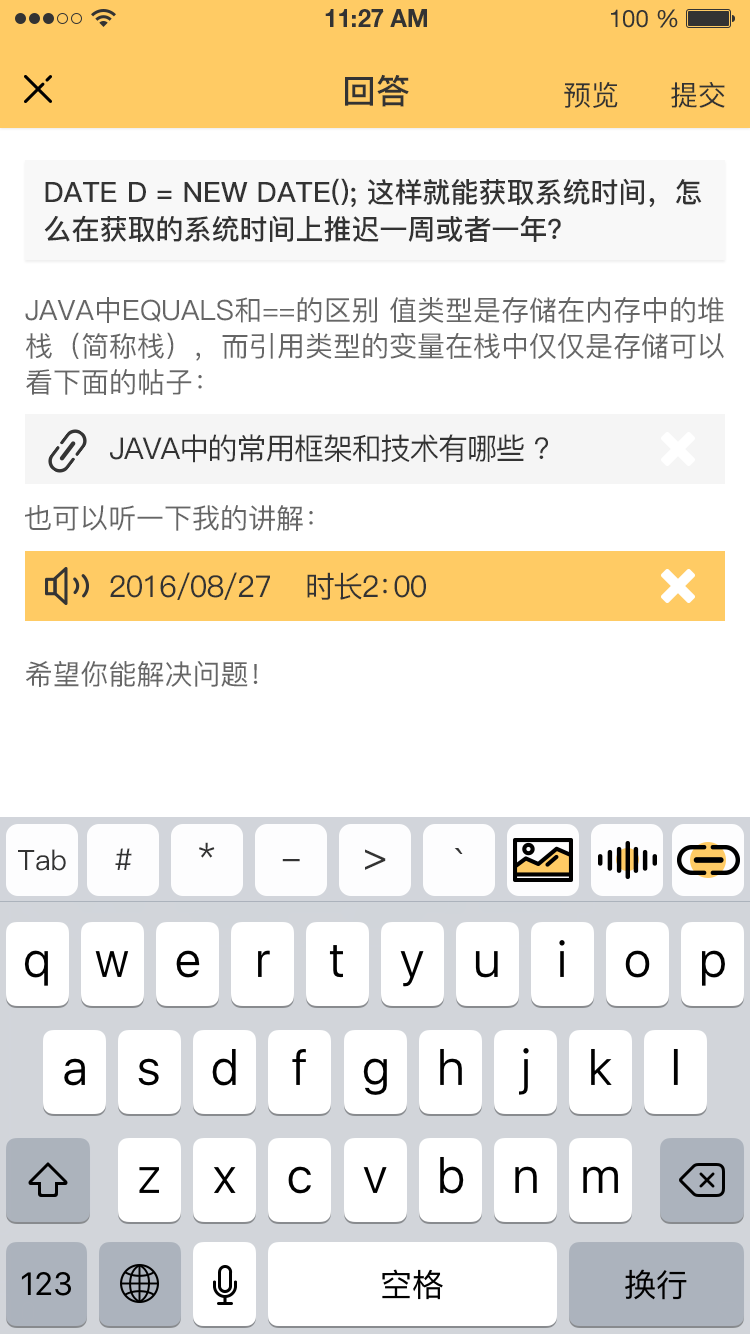
<style>
.page{position:relative;width:750px;height:1334px;background:#ffffff}
.page>*{position:absolute;margin:0}
.t1{font:34px "PingFang-SC-Bold";color:#333333;text-transform:uppercase}
.t2{font:28px "PingFang-SC-Medium";color:#333333;text-transform:uppercase}
.t3{font:28px/37px "PingFang-SC-Bold";color:#333333;text-transform:uppercase}
.t4{font:28px/36px "PingFang-SC-Medium";color:#666666;text-transform:uppercase}
.t5{font:30px "PingFang-SC-Medium";letter-spacing:-0.04em;color:#333333;text-transform:uppercase}
.t6{font:28px "PingFang-SC-Medium";color:#666666;text-transform:uppercase}
.t7{font:30px "PingFang-SC-Medium";letter-spacing:-0.06em;color:#333333;text-transform:uppercase}
.t8{font:30px "PingFang-SC-Medium";letter-spacing:-0.48em;color:#333333;text-transform:uppercase}
.t9{font:34px "PingFang-SC-Medium";color:#333333}
.t10{font:28px "PingFang-SC-Medium";color:#333333}
.t11{font:30px "PingFang-SC-Medium";color:#333333}
.t12{font:40px "PingFang-SC-Medium";color:#333333}
</style>
<div class="page">
<p class="t1" style="left:345px;top:74px;width:64px;height:33px">回答</p>
<p class="t2" style="left:564px;top:82px;width:54px;height:26px">预览</p>
<p class="t2" style="left:671px;top:82px;width:54px;height:26px">提交</p>
<p class="t3" style="left:44px;top:178px;width:658px;height:64px">Date d = new Date(); 这样就能获取系统时间，怎<br>么在获取的系统时间上推迟一周或者一年？</p>
<p class="t4" style="left:25px;top:297px;width:699px;height:98px">java中equals和==的区别 值类型是存储在内存中的堆<br>栈（简称栈），而引用类型的变量在栈中仅仅是存储可以<br>看下面的帖子：</p>
<p class="t5" style="left:110px;top:434px;width:438px;height:29px">Java中的常用框架和技术有哪些 ?</p>
<p class="t6" style="left:25px;top:505px;width:288px;height:26px">也可以听一下我的讲解：</p>
<p class="t5" style="left:110px;top:572px;width:160px;height:28px">2016/08/27</p>
<p class="t7" style="left:307px;top:572px;width:119px;height:28px">时长2<span class="t8">：</span>00</p>
<p class="t6" style="left:26px;top:661px;width:232px;height:26px">希望你能解决问题！</p>
<p class="t9" style="left:199px;top:842px;width:16px;height:16px">*</p>
<p class="t10" style="left:18px;top:849px;width:48px;height:22px"><span class="t2">T</span>ab</p>
<p class="t11" style="left:115px;top:848px;width:17px;height:22px">#</p>
<p class="t12" style="left:365px;top:849px;width:21px;height:21px">&gt;</p>
<p class="t12" style="left:454px;top:848px;width:9px;height:6px">`</p>
<p class="t9" style="left:282px;top:859px;width:18px;height:3px">-</p>
</div>
